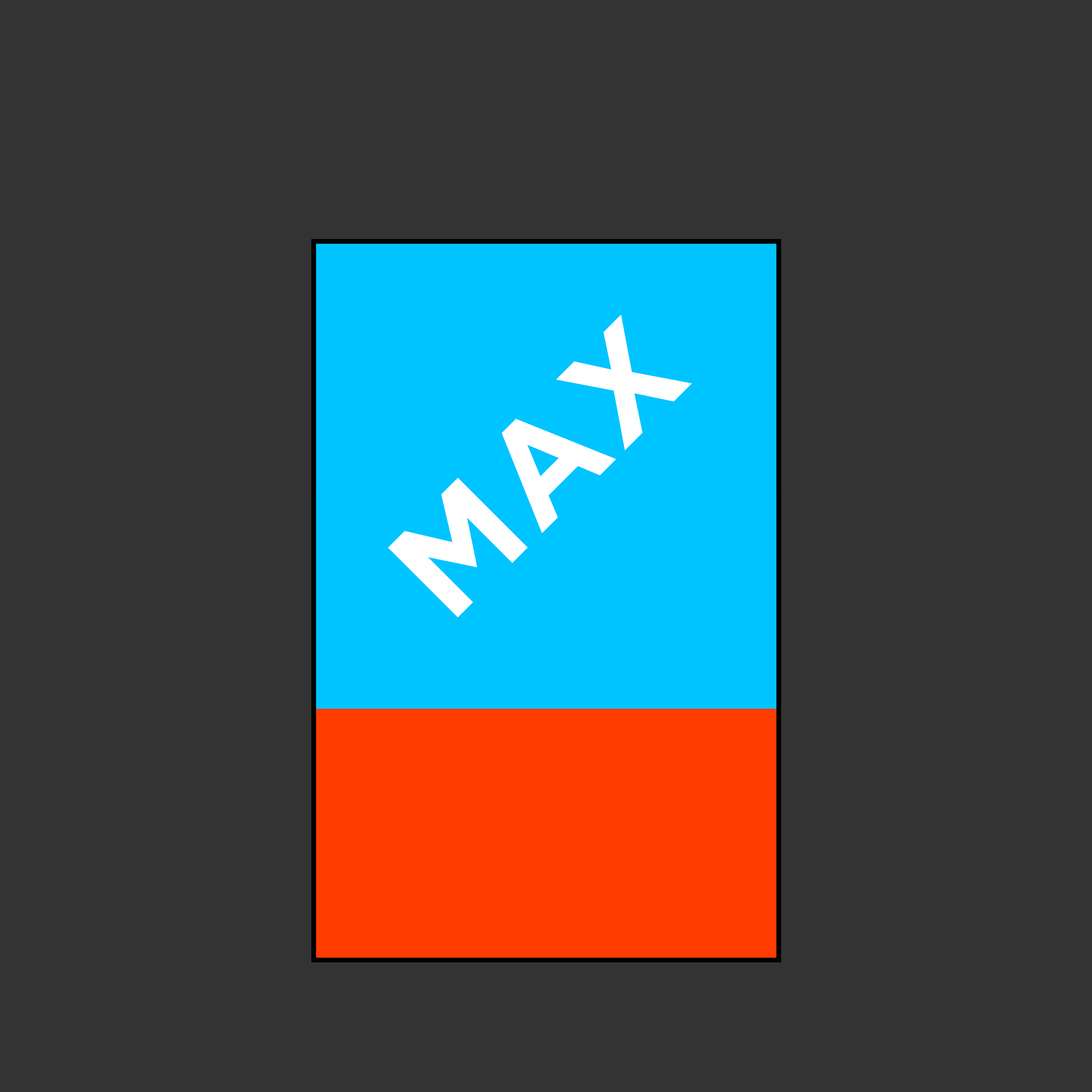
<style>
.page{position:relative;width:1092px;height:1092px;background:#333333}
.page>*{position:absolute;margin:0}
.t1{font:140.7px "Gotham-Bold";letter-spacing:0.01em;color:#ffffff;text-transform:uppercase;font-weight:bold}
</style>
<div class="page">
<p class="t1" style="left:388px;top:315px;width:304px;height:303px;rotate:-45deg">MAX</p>
</div>
